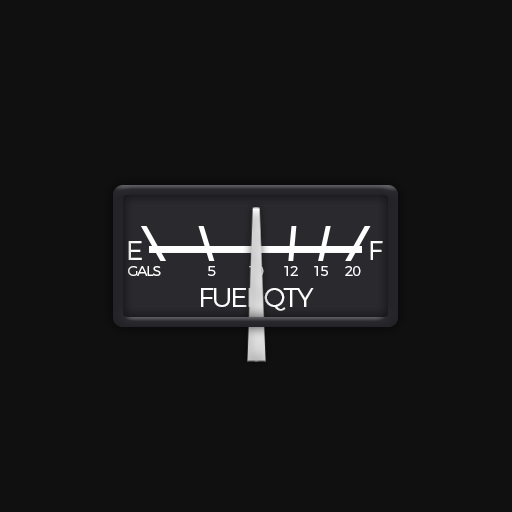
<style>
.page{position:relative;width:512px;height:512px;background:#101010}
.page>*{position:absolute;margin:0}
.t1{font:26.6px "Montserrat-Light";letter-spacing:-0.085em;color:#fefefe}
.t2{font:14.4px "Montserrat-Light";letter-spacing:-0.085em;color:#fefefe}
.t3{font:14.1px "Montserrat-Light";letter-spacing:-0.085em;color:#fefefe}
.t4{font:27.3px "Montserrat-Light";letter-spacing:-0.085em;color:#fefefe}
</style>
<div class="page">
<p class="t1" style="left:128px;top:241px;width:14px;height:19px">E</p>
<p class="t1" style="left:370px;top:241px;width:13px;height:19px">F</p>
<p class="t2" style="left:128px;top:266px;width:33px;height:10px">GALS</p>
<p class="t3" style="left:208px;top:266px;width:8px;height:10px">5</p>
<p class="t3" style="left:284px;top:266px;width:14px;height:10px">12</p>
<p class="t3" style="left:314px;top:266px;width:14px;height:10px">15</p>
<p class="t3" style="left:345px;top:266px;width:16px;height:10px">20</p>
<p class="t4" style="left:201px;top:288px;width:113px;height:23px">FUEL QTY</p>
</div>
